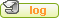
<style>
.page{position:relative;width:59px;height:18px}
.page>*{position:absolute;margin:0}
.t1{font:11px "Arial-BoldMT";color:#ff9933}
</style>
<div class="page">
<p class="t1" style="left:30px;top:6px;width:16px;height:10px">log</p>
</div>
